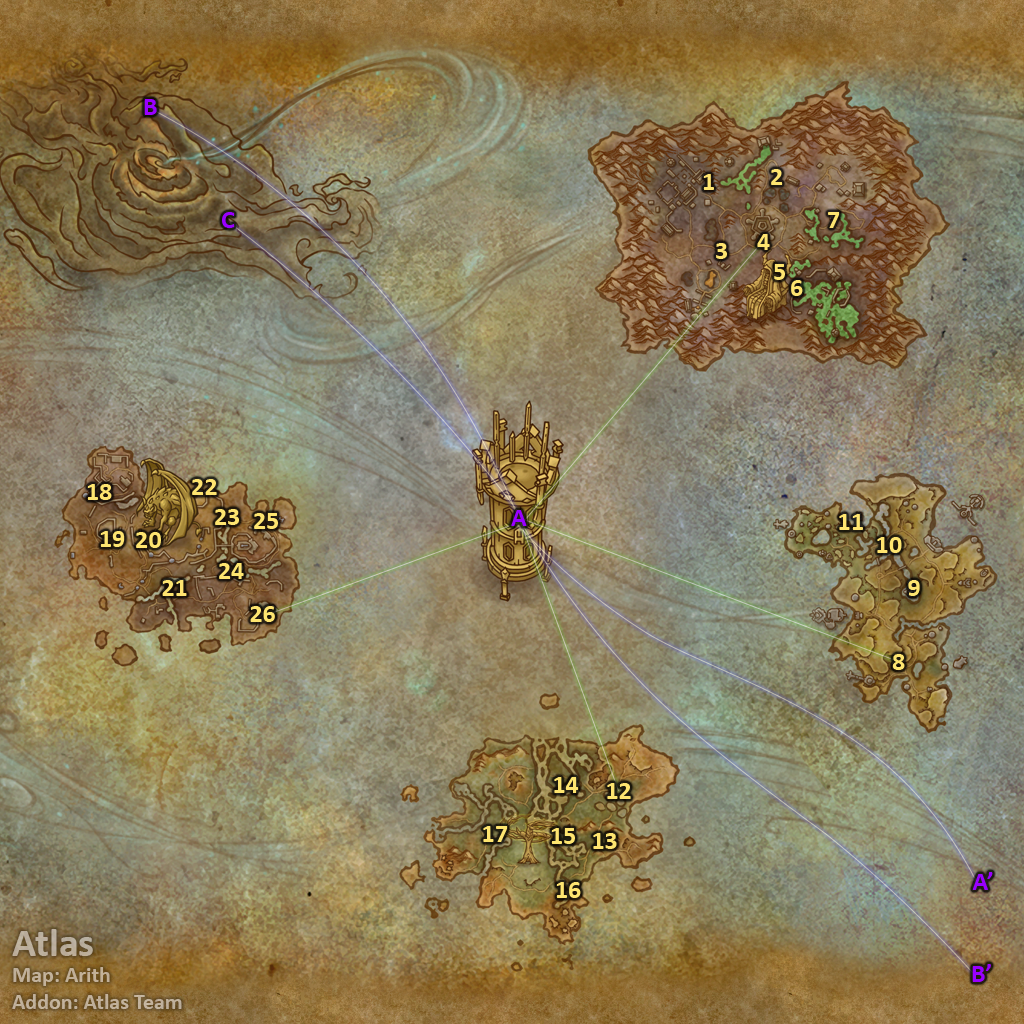
<style>
.page{position:relative;width:1024px;height:1024px}
.page>*{position:absolute;margin:0}
.t1{font:26px "Calibri-Bold";color:#9900ff}
.t2{font:26px "Calibri-Bold";color:#fee570}
.t3{font:22px "Calibri-Bold";color:#bfaf9b}
.t4{font:40px "Calibri-Bold";color:#bfaf9b}
</style>
<div class="page">
<p class="t1" style="left:144px;top:99px;width:13px;height:16px">B</p>
<p class="t2" style="left:703px;top:174px;width:11px;height:16px">1</p>
<p class="t2" style="left:771px;top:169px;width:12px;height:16px">2</p>
<p class="t1" style="left:222px;top:212px;width:13px;height:16px">C</p>
<p class="t2" style="left:828px;top:212px;width:12px;height:16px">7</p>
<p class="t2" style="left:716px;top:243px;width:11px;height:16px">3</p>
<p class="t2" style="left:757px;top:234px;width:13px;height:16px">4</p>
<p class="t2" style="left:774px;top:264px;width:11px;height:16px">5</p>
<p class="t2" style="left:791px;top:280px;width:12px;height:16px">6</p>
<p class="t2" style="left:87px;top:484px;width:25px;height:16px">18</p>
<p class="t2" style="left:192px;top:479px;width:25px;height:16px">22</p>
<p class="t2" style="left:215px;top:509px;width:24px;height:16px">23</p>
<p class="t1" style="left:511px;top:510px;width:16px;height:16px">A</p>
<p class="t2" style="left:254px;top:513px;width:24px;height:16px">25</p>
<p class="t2" style="left:839px;top:514px;width:24px;height:16px">11</p>
<p class="t2" style="left:100px;top:531px;width:25px;height:16px">19</p>
<p class="t2" style="left:136px;top:532px;width:25px;height:16px">20</p>
<p class="t2" style="left:877px;top:537px;width:25px;height:16px">10</p>
<p class="t2" style="left:219px;top:563px;width:25px;height:16px">24</p>
<p class="t2" style="left:162px;top:580px;width:25px;height:16px">21</p>
<p class="t2" style="left:908px;top:580px;width:12px;height:16px">9</p>
<p class="t2" style="left:250px;top:606px;width:25px;height:16px">26</p>
<p class="t2" style="left:892px;top:654px;width:13px;height:16px">8</p>
<p class="t2" style="left:554px;top:777px;width:25px;height:16px">14</p>
<p class="t2" style="left:607px;top:783px;width:24px;height:16px">12</p>
<p class="t2" style="left:483px;top:826px;width:25px;height:16px">17</p>
<p class="t2" style="left:551px;top:828px;width:24px;height:16px">15</p>
<p class="t2" style="left:593px;top:833px;width:24px;height:16px">13</p>
<p class="t1" style="left:972px;top:872px;width:21px;height:18px">A’</p>
<p class="t2" style="left:556px;top:882px;width:25px;height:16px">16</p>
<p class="t3" style="left:12px;top:929px;width:170px;height:80px"><span class="t4">Atlas<br></span>Map: Arith<br>Addon: Atlas Team</p>
<p class="t1" style="left:972px;top:964px;width:19px;height:18px">B’</p>
</div>
